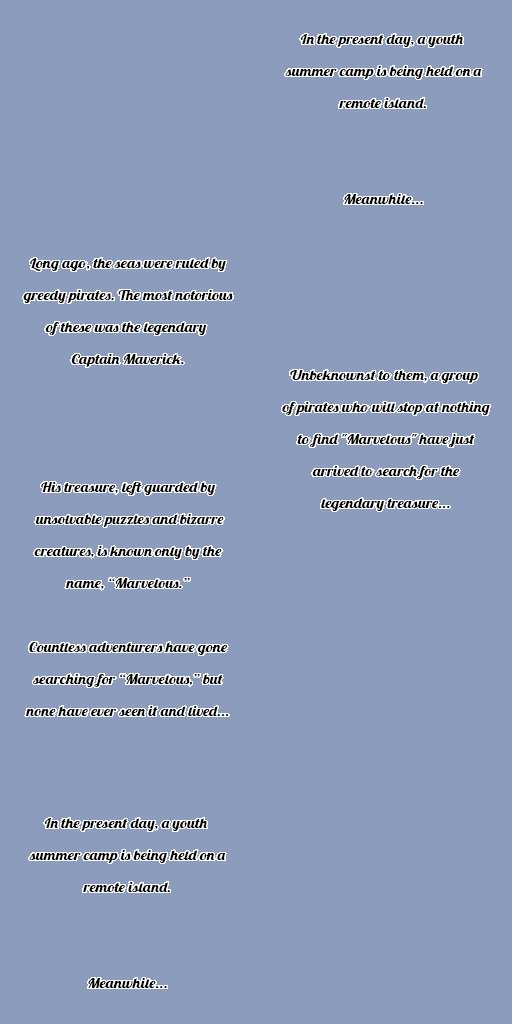
<style>
.page{position:relative;width:512px;height:1024px;background:#8c9cbd}
.page>*{position:absolute;margin:0}
.t1{font:13.9px/32px "Lobster-Regular";color:#000000;scale:1.15 1}
</style>
<div class="page">
<p class="t1" style="left:285px;top:34px;width:197px;height:170px;text-align:center">In the present day, a youth <br>summer camp is being held on a<br>remote island.<br><br><br>Meanwhile...</p>
<p class="t1" style="left:23px;top:258px;width:210px;height:458px;text-align:center">Long ago, the seas were ruled by<br>greedy pirates. The most notorious<br>of these was the legendary <br>Captain Maverick.<br><br><br><br>His treasure, left guarded by<br> unsolvable puzzles and bizarre<br>creatures, is known only by the<br>name, “Marvelous.”<br><br>Countless adventurers have gone<br>searching for “Marvelous,” but<br>none have ever seen it and lived...</p>
<p class="t1" style="left:282px;top:370px;width:208px;height:141px;text-align:center">Unbeknownst to them, a group <br>of pirates who will stop at nothing<br> to find "Marvelous" have just <br>arrived to search for the<br>legendary treasure...</p>
<p class="t1" style="left:29px;top:818px;width:197px;height:170px;text-align:center">In the present day, a youth <br>summer camp is being held on a<br>remote island.<br><br><br>Meanwhile...</p>
</div>
